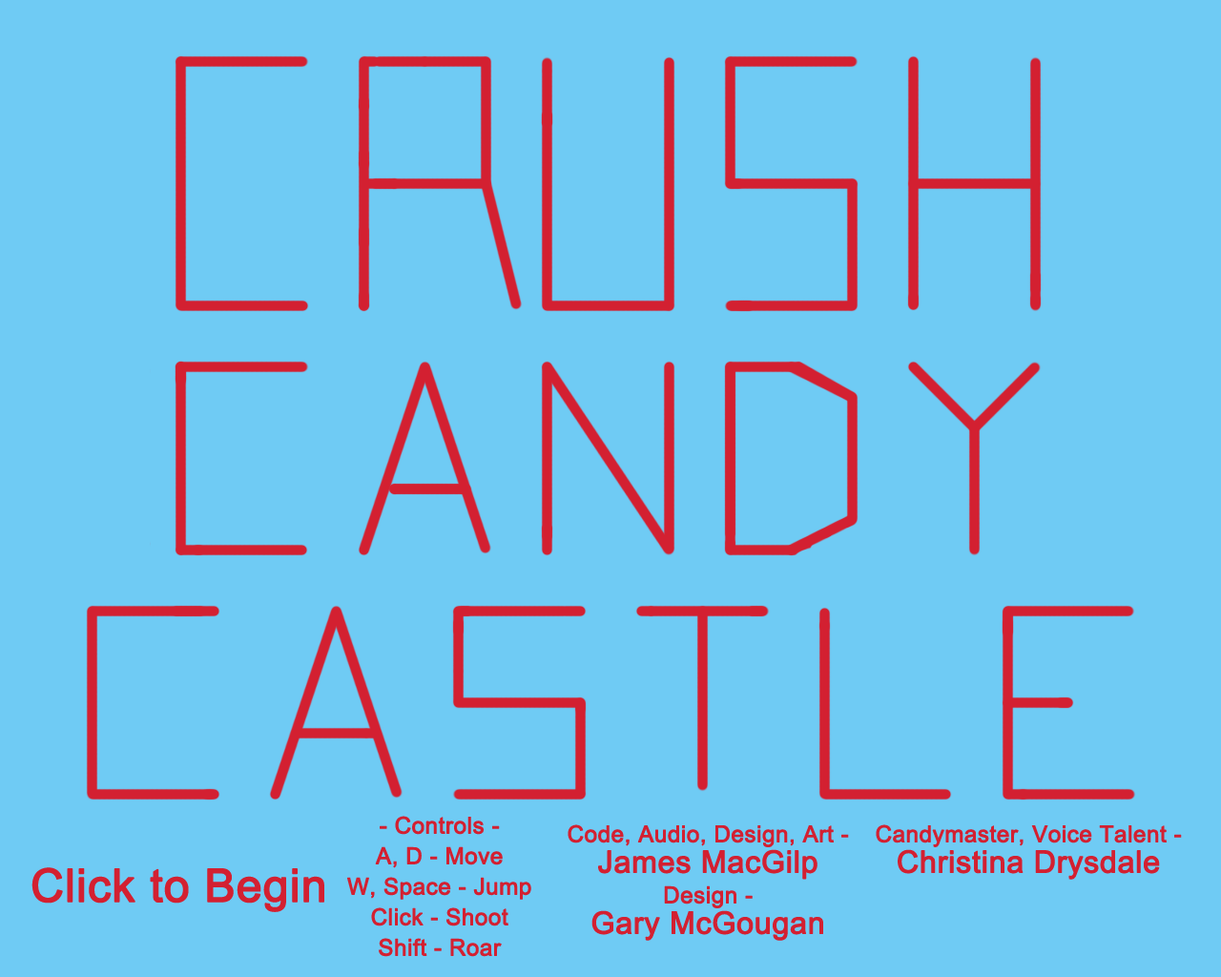
<style>
.page{position:relative;width:1221px;height:977px;background:#6fcbf4}
.page>*{position:absolute;margin:0}
.t1{font:22.9px/30.5px "ArialMT";color:#d32031;font-weight:bold}
.t2{font:30.5px/30.5px "ArialMT";color:#d32031;font-weight:bold}
.t3{font:45.8px "ArialMT";color:#d32031;font-weight:bold}
</style>
<div class="page">
<p class="t1" style="left:347px;top:816px;width:184px;height:141px;text-align:center">- Controls -<br>A, D - Move<br>W, Space - Jump<br>Click - Shoot<br>Shift - Roar</p>
<p class="t1" style="left:568px;top:824px;width:281px;height:116px;text-align:center">Code, Audio, Design, Art -<br><span class="t2">James MacGilp<br></span>Design -<br><span class="t2">Gary McGougan</span></p>
<p class="t1" style="left:876px;top:824px;width:306px;height:55px;text-align:center">Candymaster, Voice Talent -<br><span class="t2">Christina Drysdale</span></p>
<p class="t3" style="left:31px;top:867px;width:293px;height:45px">Click to Begin</p>
</div>
